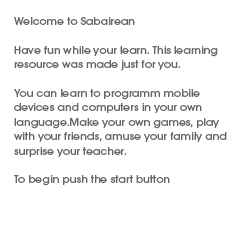
<style>
.page{position:relative;width:240px;height:227px;background:#ffffff}
.page>*{position:absolute;margin:0}
.t1{font:12px "AvantGardeMdITC";color:#666666}
</style>
<div class="page">
<p class="t1" style="left:14px;top:17px;width:213px;height:169px">Welcome to Sabairean<br><br>Have fun while your learn. This learning resource was made just for you. <br><br>You can learn to programm mobile devices and computers in your own language.Make your own games, play with your friends, amuse your family and surprise your teacher.<br><br>To begin push the start button</p>
</div>
